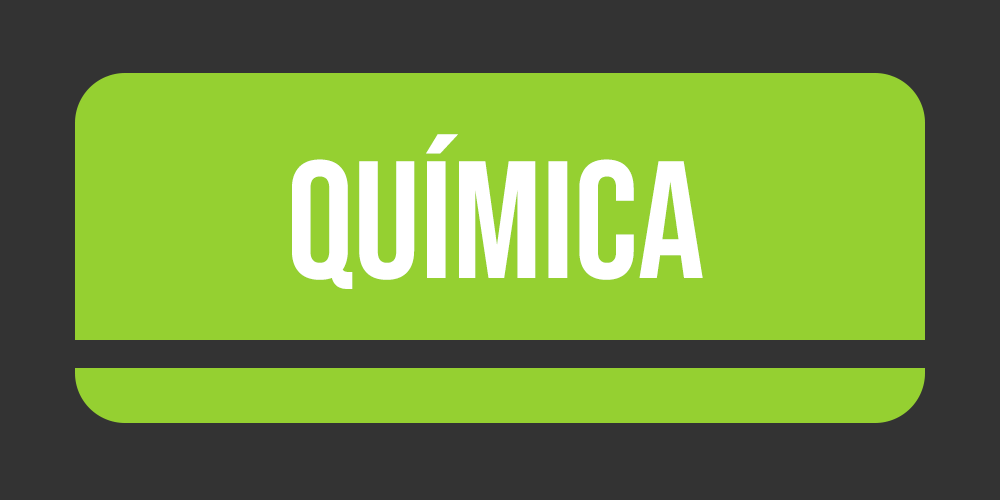
<style>
.page{position:relative;width:1000px;height:500px;background:#95d031}
.page>*{position:absolute;margin:0}
.t1{font:166.7px "BebasNeue-Regular";color:#ffffff}
</style>
<div class="page">
<p class="t1" style="left:292px;top:134px;width:411px;height:155px">química</p>
</div>
